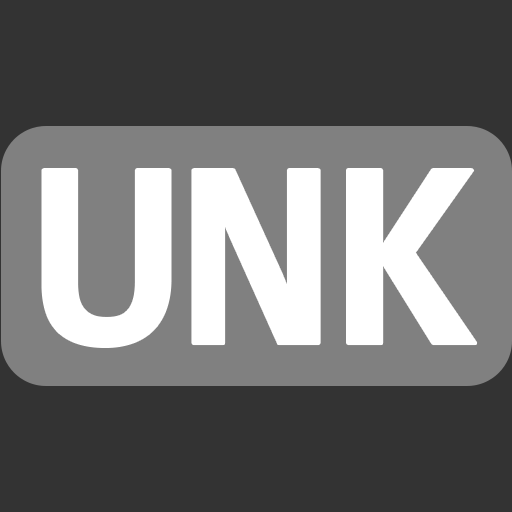
<style>
.page{position:relative;width:512px;height:512px;background:#333333}
.page>*{position:absolute;margin:0}
.t1{font:271px "Consolas-Bold";color:#ffffff}
</style>
<div class="page">
<p class="t1" style="left:43px;top:170px;width:433px;height:176px">UNK</p>
</div>
